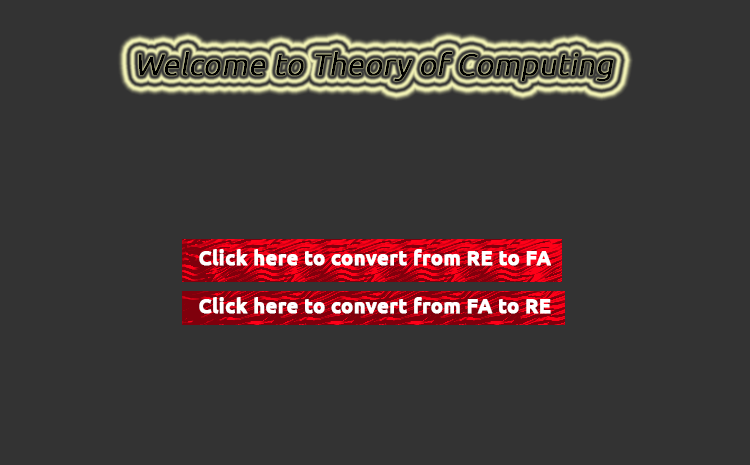
<style>
.page{position:relative;width:750px;height:465px;background:#333333}
.page>*{position:absolute;margin:0}
.t1{font:30px "Ubuntu-Light";color:#000000;font-weight:bold;font-style:italic}
.t2{font:20px "Ubuntu-Bold";color:#ffffff;font-weight:bold}
</style>
<div class="page">
<p class="t1" style="left:138px;top:51px;width:476px;height:31px">Welcome to Theory of Computing</p>
<p class="t2" style="left:199px;top:249px;width:352px;height:65px;text-align:center">Click here to convert from RE to FA<br><br>Click here to convert from FA to RE</p>
</div>
